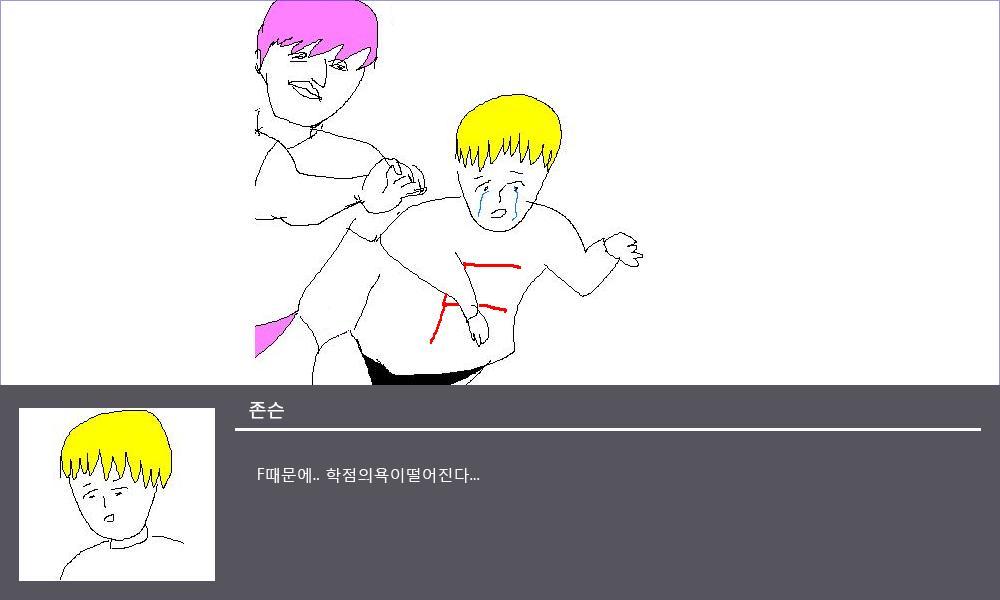
<style>
.page{position:relative;width:1000px;height:600px;background:#ffffff}
.page>*{position:absolute;margin:0}
.t1{font:18px "MalgunGothicRegular";letter-spacing:-0.01em;color:#ffffff;font-weight:bold}
.t2{font:16px "MalgunGothicRegular";color:#ffffff}
</style>
<div class="page">
<p class="t1" style="left:249px;top:402px;width:35px;height:17px">존슨</p>
<p class="t2" style="left:258px;top:468px;width:222px;height:15px">F때문에.. 학점의욕이떨어진다...</p>
</div>
